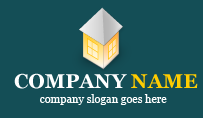
<style>
.page{position:relative;width:203px;height:118px;background:#144e56}
.page>*{position:absolute;margin:0}
.t1{font:20px "Georgia-Bold";color:#ffffff;text-transform:uppercase}
.t2{font:20px "Georgia-Bold";color:#ffcc00;text-transform:uppercase}
.t3{font:11px "Georgia";color:#ffffff}
</style>
<div class="page">
<p class="t1" style="left:14px;top:73px;width:184px;height:16px">Company <span class="t2">Name</span></p>
<p class="t3" style="left:40px;top:94px;width:127px;height:11px">company slogan goes here</p>
</div>
